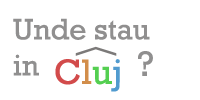
<style>
.page{position:relative;width:200px;height:100px;background:#ffffff}
.page>*{position:absolute;margin:0}
.t1{font:30px "Rockwell";color:#908f8f}
.t2{font:36px "Rockwell";color:#908f8f}
.t3{font:36px "Rockwell";color:#d24b4b}
.t4{font:36px "Rockwell";color:#d28e4b}
.t5{font:36px "Rockwell";color:#54cf51}
.t6{font:36px "Rockwell";color:#519bcf}
</style>
<div class="page">
<p class="t1" style="left:13px;top:18px;width:137px;height:58px">Unde stau <br>in</p>
<p class="t2" style="left:138px;top:51px;width:15px;height:25px">?</p>
<p class="t3" style="left:55px;top:59px;width:65px;height:33px">C<span class="t4">l</span><span class="t5">u</span><span class="t6">j</span></p>
</div>
